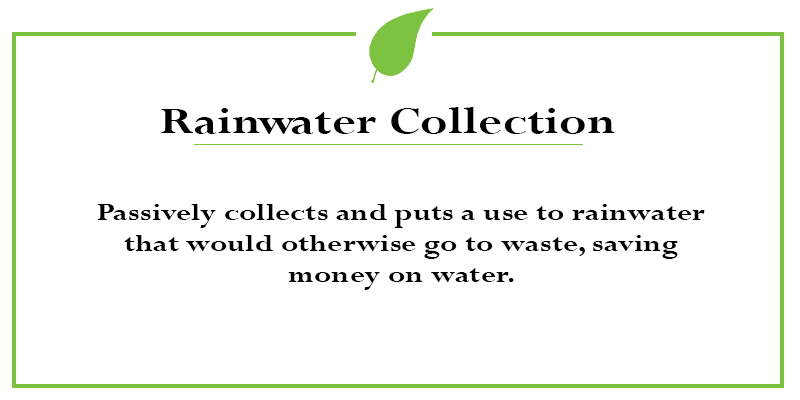
<style>
.page{position:relative;width:800px;height:400px;background:#ffffff}
.page>*{position:absolute;margin:0}
.t1{font:40.8px "Perpetua-Bold";color:#000000;scale:1.26 1}
.t2{font:40.8px "Perpetua-Bold";letter-spacing:-0.08em;color:#000000;scale:1.26 1}
.t3{font:25.6px "Perpetua-Bold";color:#000000;scale:1.26 1}
</style>
<div class="page">
<p class="t1" style="left:161px;top:107px;width:454px;height:27px">Rai<span class="t2">nw</span>ater Collection</p>
<p class="t3" style="left:97px;top:204px;width:608px;height:86px;text-align:center">Passively collects and puts a use to rainwater that would otherwise go to waste, saving money on water.</p>
</div>
